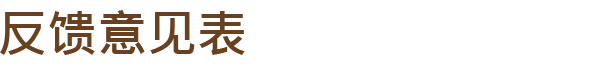
<style>
.page{position:relative;width:606px;height:75px;background:#ffffff}
.page>*{position:absolute;margin:0}
.t1{font:50px "MicrosoftJhengHeiBold";color:#684121}
</style>
<div class="page">
<p class="t1" style="left:0px;top:10px;width:245px;height:45px">反馈意见表</p>
</div>
